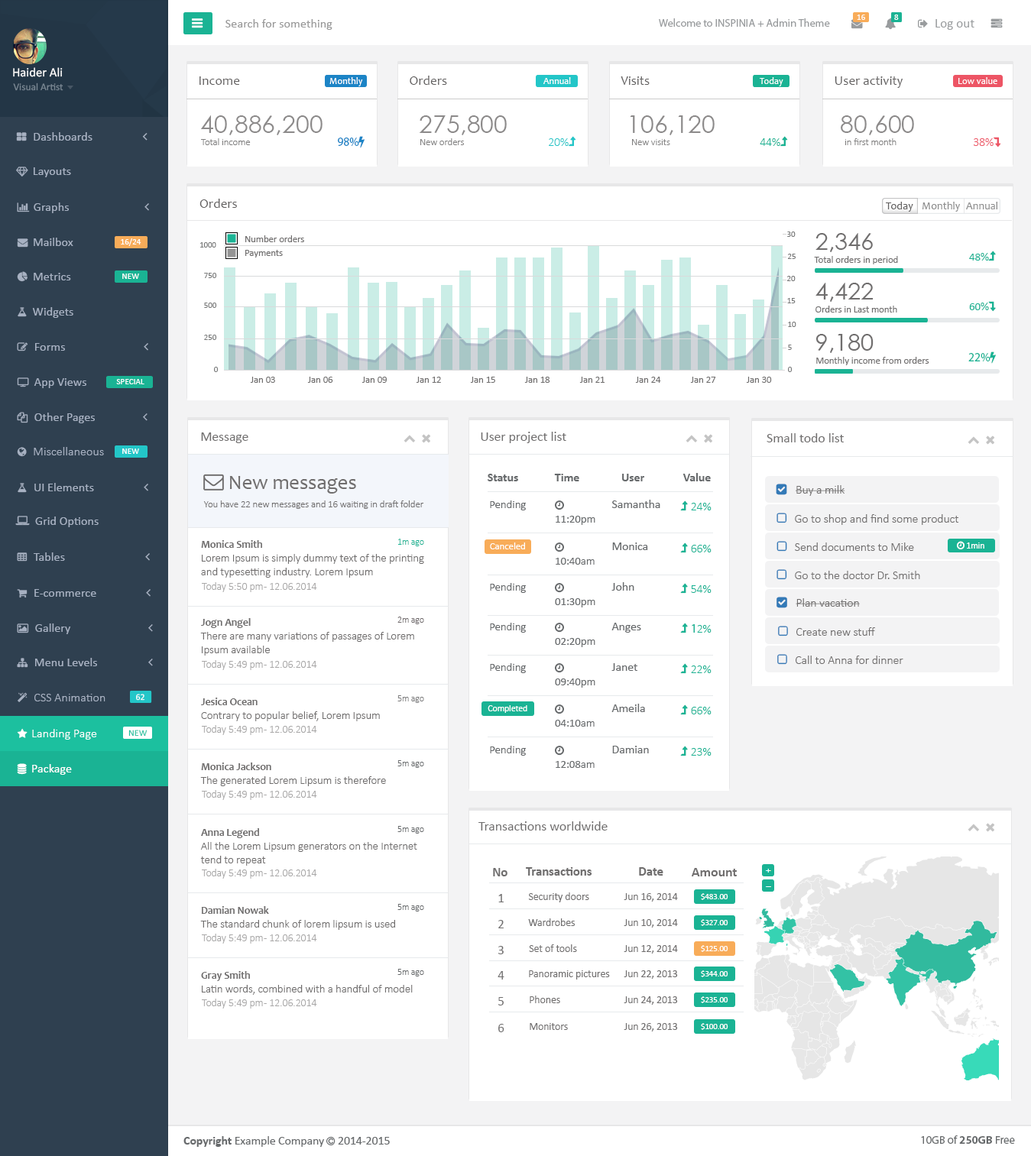
<style>
.page{position:relative;width:1031px;height:1156px;background:#ffffff}
.page>*{position:absolute;margin:0}
.t1{font:8.6px "Calibri";color:#fefefe}
.t2{font:12.4px "Calibri";color:#999999}
.t3{font:10.9px "MyriadPro-Regular";color:#999c9e}
.t4{font:12.6px "Calibri";color:#ffffff}
.t5{font:13.2px "Candara";color:#626060}
.t6{font:9.3px "Candara";color:#ffffff}
.t7{font:10.2px "Calibri";color:#7a8894}
.t8{font:24.6px "CenturyGothic";color:#8c8a8a}
.t9{font:9.6px "Calibri-Light";color:#807f7f}
.t10{font:10.9px "Candara";color:#626060}
.t11{font:10.9px "Candara";color:#8e8e8e}
.t12{font:8.2px "Calibri";color:#7a7b7b}
.t13{font:23.5px "CenturyGothic";color:#706e6e}
.t14{font:8.6px "Calibri";color:#ffffff}
.t15{font:9.7px "Calibri";color:#706e6e}
.t16{font:13.5px "Calibri";color:#706e6e}
.t17{font:12px "Calibri-Bold";color:#676a6c}
.t18{font:9.7px "Calibri-Light";color:#706e6e}
.t19{font:11.2px "Calibri";color:#676a6c}
.t20{font:12px "Calibri";color:#676a6c}
.t21{font:10.5px "Candara-Bold";color:#706e6e}
.t22{font:8.9px "Calibri-Light";color:#1ab394}
.t23{font:9.7px "Calibri";color:#ffffff}
.t24{font:11.2px "Calibri-Light";color:#706e6e}
.t25{font:10.5px "Calibri-Light";color:#a8a7a7}
.t26{font:8.9px "Calibri-Light";color:#706a6c}
.t27{font:8.8px "Calibri";color:#ffffff;scale:1.05 1}
.t28{font:8.9px "Calibri-Light";color:#7a7a7b}
.t29{font:8.9px "Calibri";color:#ffffff}
.t30{font:8.8px "Calibri";color:#1cc09f;scale:1.05 1}
.t31{font:8.9px "Calibri-Light";color:#676a6c}
.t32{font:12.7px "Calibri-Bold";color:#706e6e}
.t33{font:13.5px "Calibri-Bold";color:#706e6e}
.t34{font:10.5px "Calibri";color:#706e6e}
.t35{font:8.2px "Calibri";color:#ffffff}
.t36{font:12.7px "Calibri";color:#706e6e}
.t37{font:11.2px "MyriadPro-Regular";color:#676a6c}
.t38{font:11.2px "MyriadPro-Bold";color:#676a6c}
</style>
<div class="page">
<p class="t1" style="left:857px;top:15px;width:8px;height:5px">16</p>
<p class="t1" style="left:894px;top:15px;width:5px;height:5px">8</p>
<p class="t2" style="left:225px;top:19px;width:107px;height:11px">Search for something</p>
<p class="t3" style="left:659px;top:18px;width:171px;height:10px">Welcome to INSPINIA + Admin Theme</p>
<p class="t4" style="left:13px;top:67px;width:50px;height:10px">Haider Ali</p>
<p class="t5" style="left:199px;top:76px;width:41px;height:9px">Income</p>
<p class="t6" style="left:329px;top:77px;width:34px;height:9px">Monthly</p>
<p class="t5" style="left:410px;top:76px;width:37px;height:9px">Orders</p>
<p class="t6" style="left:543px;top:77px;width:28px;height:7px">Annual</p>
<p class="t5" style="left:621px;top:76px;width:29px;height:9px">Visits</p>
<p class="t6" style="left:760px;top:77px;width:23px;height:9px">Today</p>
<p class="t5" style="left:835px;top:76px;width:68px;height:12px">User activity</p>
<p class="t6" style="left:958px;top:77px;width:39px;height:7px">Low value</p>
<p class="t7" style="left:13px;top:83px;width:50px;height:8px">Visual Artist</p>
<p class="t8" style="left:201px;top:115px;width:122px;height:20px">40,886,200</p>
<p class="t8" style="left:419px;top:115px;width:88px;height:20px">275,800</p>
<p class="t8" style="left:630px;top:115px;width:85px;height:20px">106,120</p>
<p class="t8" style="left:841px;top:115px;width:73px;height:20px">80,600</p>
<p class="t9" style="left:201px;top:138px;width:50px;height:7px">Total income</p>
<p class="t9" style="left:420px;top:138px;width:44px;height:7px">New orders</p>
<p class="t9" style="left:632px;top:139px;width:38px;height:6px">New visits</p>
<p class="t9" style="left:845px;top:138px;width:52px;height:7px">in first month</p>
<p class="t5" style="left:199px;top:199px;width:38px;height:9px">Orders</p>
<p class="t10" style="left:886px;top:202px;width:27px;height:10px">Today</p>
<p class="t11" style="left:922px;top:202px;width:38px;height:10px">Monthly</p>
<p class="t11" style="left:966px;top:202px;width:32px;height:7px">Annual</p>
<p class="t12" style="left:787px;top:232px;width:9px;height:5px">30</p>
<p class="t13" style="left:816px;top:233px;width:57px;height:19px">2,346</p>
<p class="t14" style="left:121px;top:238px;width:20px;height:8px">16/24</p>
<p class="t12" style="left:200px;top:242px;width:16px;height:6px">1000</p>
<p class="t15" style="left:245px;top:235px;width:59px;height:7px">Number orders</p>
<p class="t15" style="left:245px;top:250px;width:38px;height:8px">Payments</p>
<p class="t12" style="left:788px;top:254px;width:8px;height:5px">25</p>
<p class="t15" style="left:814px;top:256px;width:84px;height:8px">Total orders in period</p>
<p class="t14" style="left:122px;top:274px;width:17px;height:5px">NEW</p>
<p class="t12" style="left:204px;top:273px;width:13px;height:5px">750</p>
<p class="t12" style="left:787px;top:276px;width:9px;height:5px">20</p>
<p class="t13" style="left:816px;top:283px;width:58px;height:19px">4,422</p>
<p class="t12" style="left:204px;top:303px;width:13px;height:5px">500</p>
<p class="t12" style="left:787px;top:298px;width:9px;height:5px">15</p>
<p class="t15" style="left:816px;top:306px;width:81px;height:7px">Orders in Last month</p>
<p class="t12" style="left:788px;top:322px;width:8px;height:5px">10</p>
<p class="t12" style="left:204px;top:335px;width:13px;height:5px">250</p>
<p class="t13" style="left:816px;top:334px;width:58px;height:19px">9,180</p>
<p class="t12" style="left:788px;top:345px;width:4px;height:5px">5</p>
<p class="t15" style="left:816px;top:357px;width:113px;height:8px">Monthly income from orders</p>
<p class="t12" style="left:214px;top:367px;width:5px;height:5px">0</p>
<p class="t15" style="left:250px;top:377px;width:25px;height:6px">Jan 03</p>
<p class="t15" style="left:307px;top:377px;width:26px;height:6px">Jan 06</p>
<p class="t15" style="left:362px;top:377px;width:25px;height:6px">Jan 09</p>
<p class="t15" style="left:416px;top:377px;width:25px;height:6px">Jan 12</p>
<p class="t15" style="left:470px;top:377px;width:25px;height:6px">Jan 15</p>
<p class="t15" style="left:524px;top:377px;width:26px;height:6px">Jan 18</p>
<p class="t15" style="left:579px;top:377px;width:26px;height:6px">Jan 21</p>
<p class="t15" style="left:635px;top:377px;width:26px;height:6px">Jan 24</p>
<p class="t15" style="left:690px;top:377px;width:26px;height:6px">Jan 27</p>
<p class="t15" style="left:746px;top:377px;width:26px;height:6px">Jan 30</p>
<p class="t12" style="left:788px;top:367px;width:5px;height:5px">0</p>
<p class="t14" style="left:116px;top:379px;width:28px;height:5px">SPECIAL</p>
<p class="t16" style="left:201px;top:433px;width:47px;height:10px">Message</p>
<p class="t16" style="left:481px;top:432px;width:85px;height:11px">User project list</p>
<p class="t16" style="left:767px;top:433px;width:77px;height:10px">Small todo list</p>
<p class="t14" style="left:122px;top:449px;width:17px;height:5px">NEW</p>
<p class="t17" style="left:488px;top:474px;width:30px;height:8px">Status</p>
<p class="t17" style="left:554px;top:474px;width:25px;height:8px">Time</p>
<p class="t17" style="left:622px;top:474px;width:22px;height:8px">User</p>
<p class="t17" style="left:683px;top:473px;width:28px;height:9px">Value</p>
<p class="t18" style="left:203px;top:501px;width:221px;height:8px">You have 22 new messages and 16 waiting in draft folder waiting www</p>
<p class="t19" style="left:490px;top:501px;width:36px;height:10px">Pending</p>
<p class="t20" style="left:611px;top:500px;width:49px;height:8px">Samantha</p>
<p class="t21" style="left:201px;top:540px;width:61px;height:8px">Monica Smith</p>
<p class="t22" style="left:398px;top:539px;width:26px;height:8px">1m ago</p>
<p class="t23" style="left:490px;top:543px;width:35px;height:7px">Canceled</p>
<p class="t20" style="left:612px;top:543px;width:36px;height:7px">Monica</p>
<p class="t24" style="left:201px;top:554px;width:223px;height:24px;text-align:right">Lorem Ipsum is simply dummy text of the printing and typesetting industry. Lorem Ipsum</p>
<p class="t25" style="left:202px;top:582px;width:115px;height:10px">Today 5:50 pm - 12.06.2014</p>
<p class="t19" style="left:490px;top:583px;width:36px;height:10px">Pending</p>
<p class="t20" style="left:611px;top:582px;width:23px;height:9px">John</p>
<p class="t26" style="left:397px;top:617px;width:27px;height:7px">2m ago</p>
<p class="t21" style="left:201px;top:618px;width:50px;height:10px">Jogn Angel</p>
<p class="t19" style="left:490px;top:623px;width:36px;height:10px">Pending</p>
<p class="t20" style="left:611px;top:623px;width:30px;height:10px">Anges</p>
<p class="t24" style="left:200px;top:632px;width:214px;height:24px;text-align:right">There are many variations of passages of Lorem Ipsum available</p>
<p class="t25" style="left:202px;top:660px;width:115px;height:10px">Today 5:49 pm - 12.06.2014</p>
<p class="t19" style="left:490px;top:663px;width:36px;height:10px">Pending</p>
<p class="t20" style="left:611px;top:663px;width:26px;height:8px">Janet</p>
<p class="t27" style="left:136px;top:694px;width:9px;height:7px">62</p>
<p class="t21" style="left:201px;top:698px;width:57px;height:7px">Jesica Ocean</p>
<p class="t28" style="left:397px;top:696px;width:27px;height:7px">5m ago</p>
<p class="t24" style="left:201px;top:712px;width:179px;height:10px">Contrary to popular belief, Lorem Ipsum</p>
<p class="t29" style="left:488px;top:705px;width:39px;height:8px">Completed</p>
<p class="t20" style="left:611px;top:704px;width:34px;height:8px">Ameila</p>
<p class="t25" style="left:202px;top:725px;width:115px;height:10px">Today 5:49 pm - 12.06.2014</p>
<p class="t30" style="left:128px;top:730px;width:20px;height:7px">NEW</p>
<p class="t19" style="left:490px;top:746px;width:36px;height:10px">Pending</p>
<p class="t20" style="left:612px;top:746px;width:37px;height:8px">Damian</p>
<p class="t31" style="left:397px;top:761px;width:27px;height:7px">5m ago</p>
<p class="t21" style="left:201px;top:763px;width:70px;height:7px">Monica Jackson</p>
<p class="t24" style="left:200px;top:777px;width:186px;height:10px">The generated Lorem Lipsum is therefore</p>
<p class="t25" style="left:202px;top:790px;width:115px;height:10px">Today 5:49 pm - 12.06.2014</p>
<p class="t16" style="left:478px;top:822px;width:130px;height:9px">Transactions worldwide</p>
<p class="t21" style="left:201px;top:829px;width:59px;height:9px">Anna Legend</p>
<p class="t31" style="left:397px;top:826px;width:27px;height:8px">5m ago</p>
<p class="t24" style="left:200px;top:842px;width:217px;height:24px;text-align:right">All the Lorem Lipsum generators on the Internet tend to repeat</p>
<p class="t25" style="left:202px;top:869px;width:115px;height:10px">Today 5:49 pm - 12.06.2014</p>
<p class="t32" style="left:493px;top:868px;width:15px;height:9px">No</p>
<p class="t32" style="left:526px;top:868px;width:66px;height:8px">Transactions</p>
<p class="t32" style="left:639px;top:868px;width:24px;height:8px">Date</p>
<p class="t33" style="left:692px;top:868px;width:45px;height:9px">Amount</p>
<p class="t34" style="left:528px;top:893px;width:61px;height:10px">Security doors</p>
<p class="t34" style="left:624px;top:894px;width:54px;height:8px">Jun 16, 2014</p>
<p class="t35" style="left:701px;top:894px;width:27px;height:6px">$483.00</p>
<p class="t31" style="left:397px;top:904px;width:27px;height:8px">5m ago</p>
<p class="t36" style="left:498px;top:894px;width:6px;height:9px">1</p>
<p class="t21" style="left:201px;top:907px;width:68px;height:7px">Damian Nowak</p>
<p class="t24" style="left:200px;top:920px;width:195px;height:10px">The standard chunk of lorem lipsum is used</p>
<p class="t36" style="left:498px;top:920px;width:6px;height:9px">2</p>
<p class="t34" style="left:528px;top:919px;width:47px;height:7px">Wardrobes</p>
<p class="t34" style="left:624px;top:920px;width:54px;height:8px">Jun 10, 2014</p>
<p class="t35" style="left:701px;top:920px;width:27px;height:6px">$327.00</p>
<p class="t25" style="left:202px;top:934px;width:115px;height:10px">Today 5:49 pm - 12.06.2014</p>
<p class="t36" style="left:498px;top:946px;width:6px;height:9px">3</p>
<p class="t34" style="left:529px;top:945px;width:48px;height:7px">Set of tools</p>
<p class="t34" style="left:624px;top:945px;width:54px;height:9px">Jun 12, 2014</p>
<p class="t35" style="left:701px;top:945px;width:27px;height:7px">$125.00</p>
<p class="t21" style="left:201px;top:971px;width:49px;height:10px">Gray Smith</p>
<p class="t31" style="left:397px;top:969px;width:27px;height:8px">5m ago</p>
<p class="t36" style="left:498px;top:971px;width:6px;height:9px">4</p>
<p class="t34" style="left:529px;top:971px;width:81px;height:9px">Panoramic pictures</p>
<p class="t34" style="left:624px;top:971px;width:54px;height:8px">Jun 22, 2013</p>
<p class="t35" style="left:701px;top:971px;width:27px;height:7px">$344.00</p>
<p class="t24" style="left:202px;top:985px;width:211px;height:10px">Latin words, combined with a handful of model</p>
<p class="t25" style="left:202px;top:999px;width:115px;height:10px">Today 5:49 pm - 12.06.2014</p>
<p class="t36" style="left:498px;top:997px;width:6px;height:9px">5</p>
<p class="t34" style="left:530px;top:996px;width:30px;height:8px">Phones</p>
<p class="t34" style="left:624px;top:997px;width:54px;height:8px">Jun 24, 2013</p>
<p class="t35" style="left:701px;top:997px;width:27px;height:7px">$235.00</p>
<p class="t36" style="left:498px;top:1024px;width:6px;height:9px">6</p>
<p class="t34" style="left:530px;top:1023px;width:38px;height:7px">Monitors</p>
<p class="t34" style="left:624px;top:1023px;width:54px;height:9px">Jun 26, 2013</p>
<p class="t35" style="left:701px;top:1023px;width:27px;height:7px">$100.00</p>
<p class="t37" style="left:921px;top:1136px;width:94px;height:8px">10GB of <span class="t38">250GB</span> Free</p>
</div>
